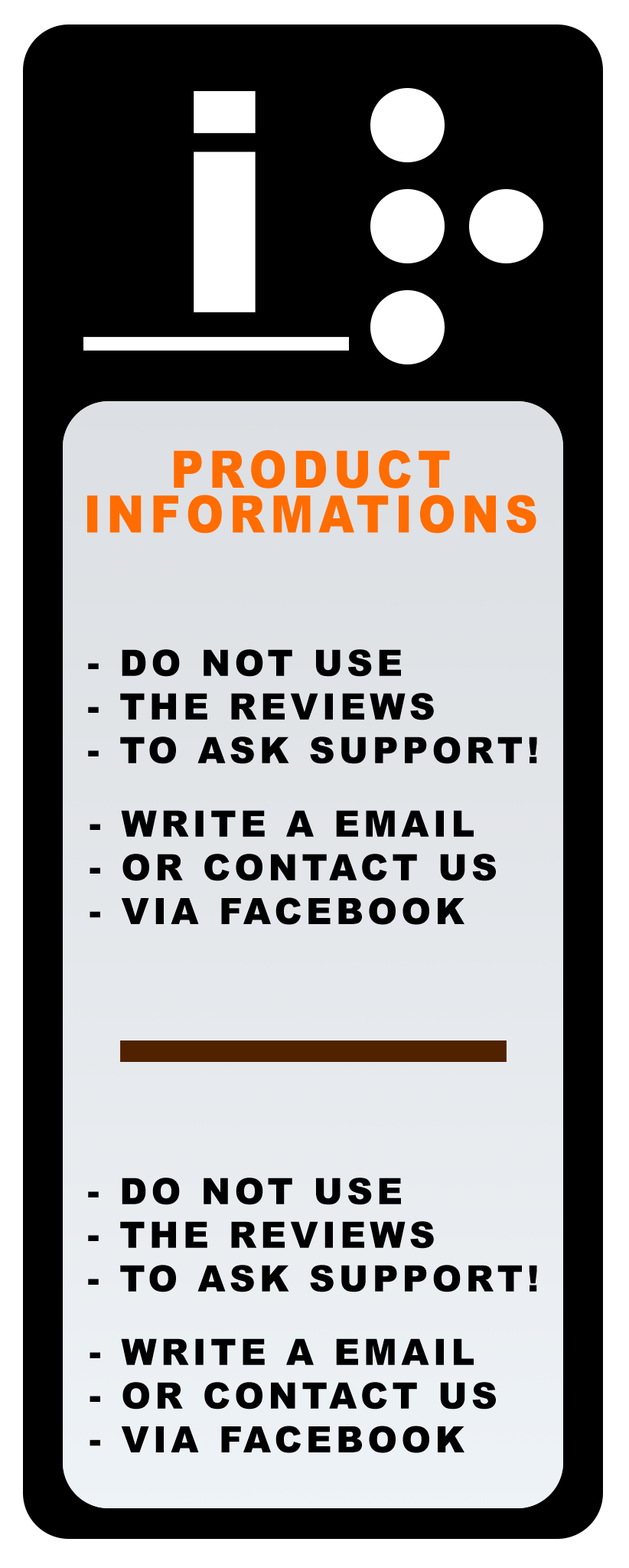
<style>
.page{position:relative;width:629px;height:1568px;background:#000000}
.page>*{position:absolute;margin:0}
.t1{font:308.5px "Arial-Black";letter-spacing:0.12em;color:#ffffff}
.t2{font:51.7px/44.7px "Arial-Black";letter-spacing:0.12em;color:#ff6c00;scale:0.88 1}
.t3{font:36.4px "Arial-Black";letter-spacing:0.12em;color:#000000}
</style>
<div class="page">
<p class="t1" style="left:194px;top:91px;width:62px;height:221px">i</p>
<p class="t2" style="left:87px;top:450px;width:450px;height:84px;text-align:center">PRODUCT<br>INFORMATIONS</p>
<p class="t3" style="left:88px;top:649px;width:449px;height:115px">- DO NOT USE<br>- THE REVIEWS<br>- TO ASK SUPPORT!</p>
<p class="t3" style="left:90px;top:810px;width:406px;height:115px">- WRITE A EMAIL<br>- OR CONTACT US<br>- VIA FACEBOOK</p>
<p class="t3" style="left:88px;top:1178px;width:449px;height:114px">- DO NOT USE<br>- THE REVIEWS<br>- TO ASK SUPPORT!</p>
<p class="t3" style="left:90px;top:1338px;width:406px;height:115px">- WRITE A EMAIL<br>- OR CONTACT US<br>- VIA FACEBOOK</p>
</div>
